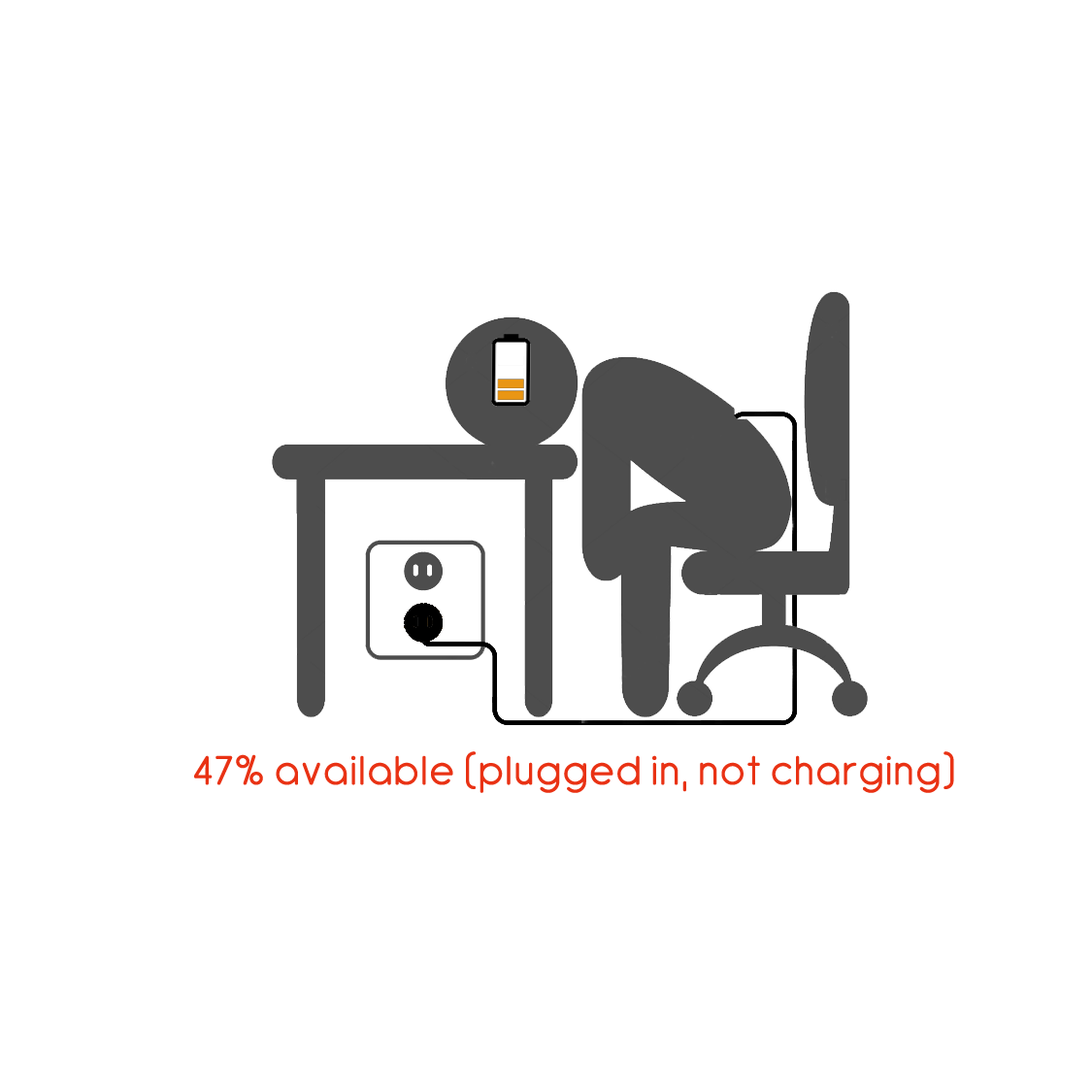
<style>
.page{position:relative;width:1092px;height:1092px;background:#ffffff}
.page>*{position:absolute;margin:0}
.t1{font:44.5px "Antipasto";letter-spacing:0.01em;color:#e93214;font-weight:bold}
</style>
<div class="page">
<p class="t1" style="left:194px;top:751px;width:760px;height:42px">47% available (plugged in, not charging)</p>
</div>
